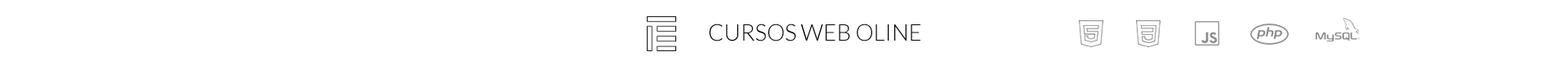
<style>
.page{position:relative;width:1568px;height:65px;background:#ffffff}
.page>*{position:absolute;margin:0}
.t1{font:23.1px "Lato-Light";color:#000000}
</style>
<div class="page">
<p class="t1" style="left:709px;top:24px;width:211px;height:18px">CURSOS WEB OLINE</p>
</div>
